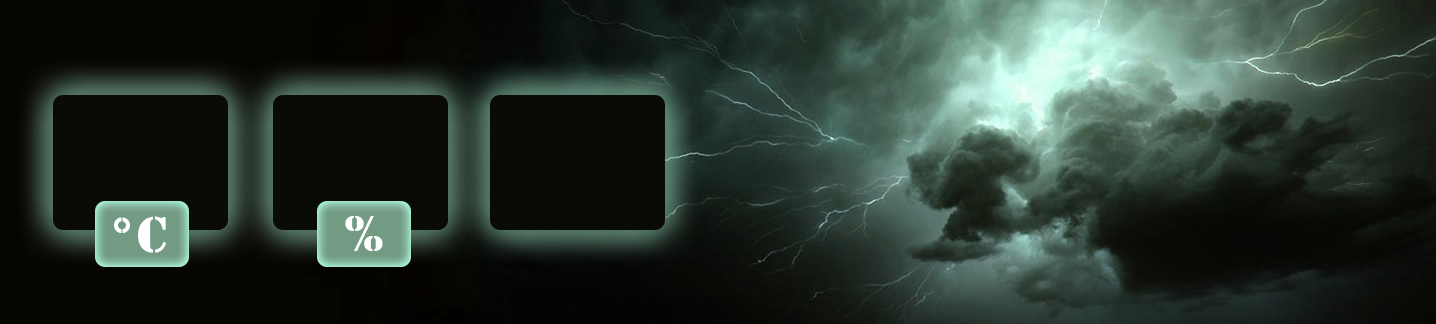
<style>
.page{position:relative;width:1436px;height:324px}
.page>*{position:absolute;margin:0}
.t1{font:52px "Stencil";letter-spacing:0.04em;color:#ffffff}
</style>
<div class="page">
<p class="t1" style="left:114px;top:216px;width:52px;height:37px">°C</p>
<p class="t1" style="left:345px;top:215px;width:38px;height:37px">%</p>
</div>
